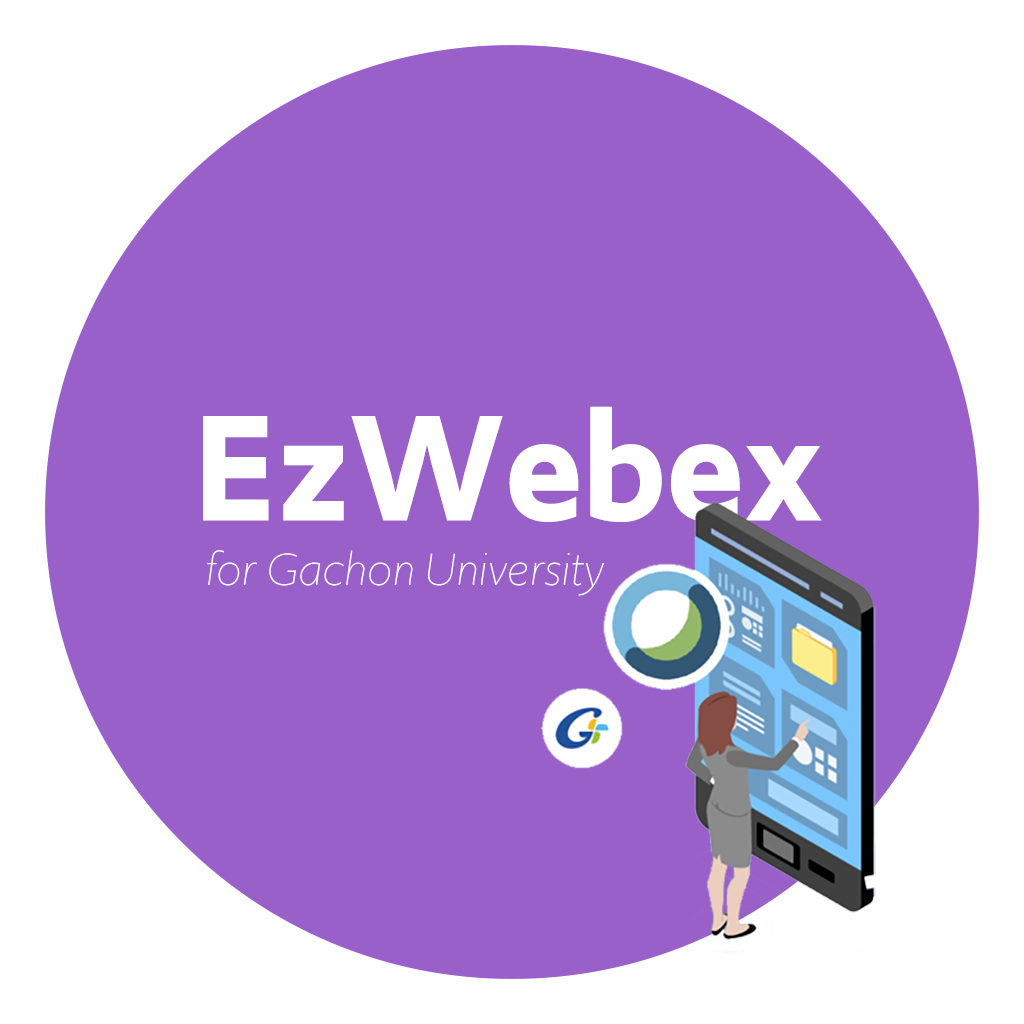
<style>
.page{position:relative;width:1024px;height:1024px;background:#9860c8}
.page>*{position:absolute;margin:0}
.t1{font:158.4px "Upgrade-Semibold";color:#ffffff}
.t2{font:47.4px "Upgrade-LightItalic";color:#ffffff}
</style>
<div class="page">
<p class="t1" style="left:203px;top:406px;width:619px;height:116px">EzWebex</p>
<p class="t2" style="left:207px;top:550px;width:397px;height:46px">for Gachon University</p>
</div>
